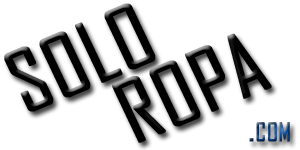
<style>
.page{position:relative;width:300px;height:150px;background:#ffffff}
.page>*{position:absolute;margin:0}
.t1{font:81.7px "AgencyFB-Reg";color:#000000;font-variant:small-caps;font-weight:bold;scale:1.04 1}
.t2{font:36px "AgencyFB-Reg";font-variant:small-caps;font-weight:bold}
</style>
<div class="page">
<p class="t1" style="left:4px;top:3px;width:152px;height:109px;rotate:-23deg">SOLO</p>
<p class="t1" style="left:112px;top:33px;width:160px;height:110px;rotate:-23deg">ROPA</p>
<p class="t2" style="left:249px;top:122px;width:41px;height:20px">.com</p>
</div>
